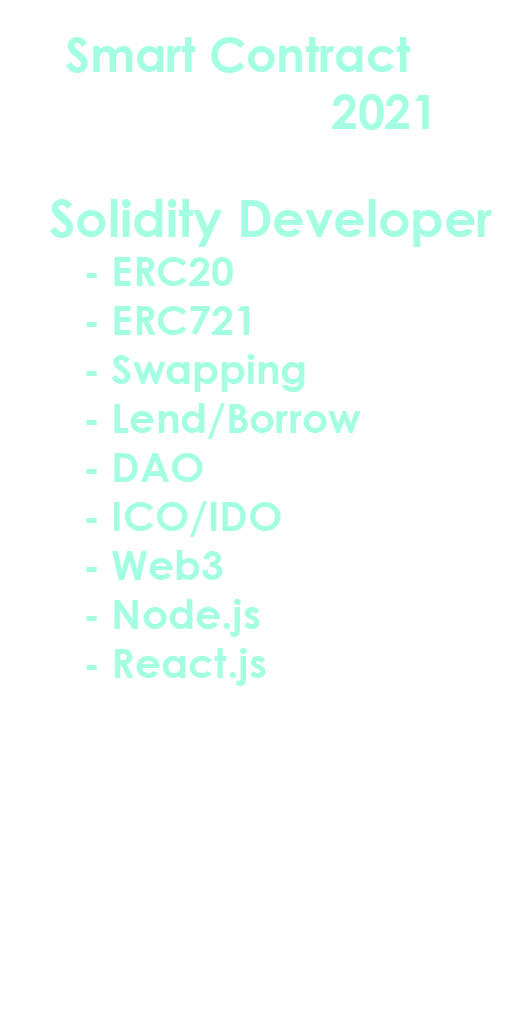
<style>
.page{position:relative;width:512px;height:1024px;background:#ffffff}
.page>*{position:absolute;margin:0}
.t1{font:47.5px "CenturyGothic-Bold";color:#a4ffe2}
.t2{font:40.8px "CenturyGothic-Bold";color:#a4ffe2}
.t3{font:50.8px "CenturyGothic-Bold";color:#a4ffe2}
</style>
<div class="page">
<p class="t1" style="left:66px;top:37px;width:363px;height:93px">Smart Contract<br>                        2021</p>
<p class="t2" style="left:50px;top:199px;width:443px;height:487px"><span class="t3">Solidity Developer  <br></span>   - ERC20<br>   - ERC721<br>   - Swapping<br>   - Lend/Borrow<br>   - DAO<br>   - ICO/IDO<br>   - Web3<br>   - Node.js<br>   - React.js</p>
</div>
